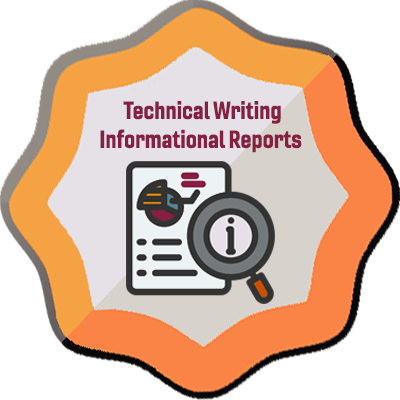
<style>
.page{position:relative;width:400px;height:400px;background:#ffffff}
.page>*{position:absolute;margin:0}
.t1{font:24px "Gineso-ConBol";color:#861f41}
</style>
<div class="page">
<p class="t1" style="left:100px;top:101px;width:202px;height:52px;text-align:center">Technical Writing<br>Informational Reports</p>
</div>
